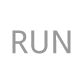
<style>
.page{position:relative;width:80px;height:80px;background:#ffffff}
.page>*{position:absolute;margin:0}
.t1{font:31.8px "DroidSans";color:#999999}
</style>
<div class="page">
<p class="t1" style="left:12px;top:30px;width:59px;height:24px">RUN</p>
</div>
